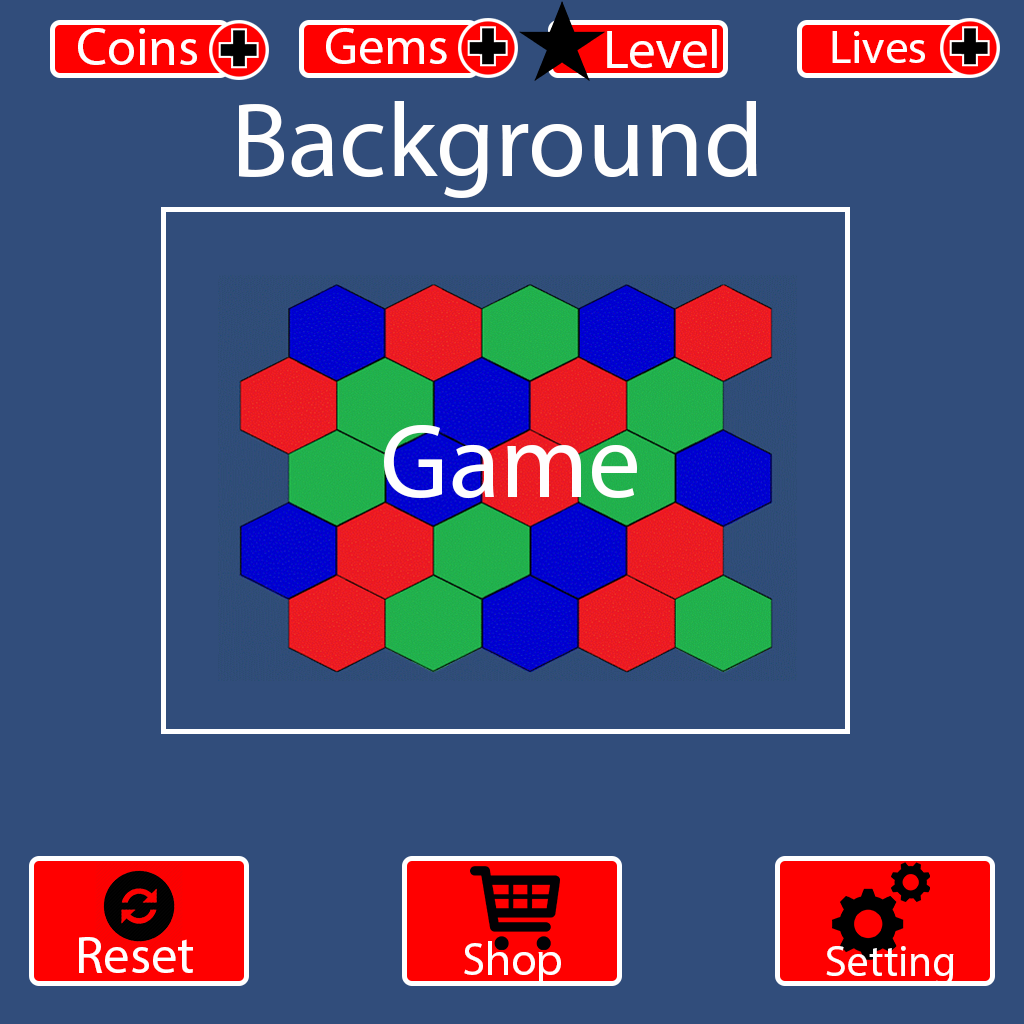
<style>
.page{position:relative;width:1024px;height:1024px;background:#314d7b}
.page>*{position:absolute;margin:0}
.t1{font:53.3px "MyriadPro-Regular";color:#fefefe}
.t2{font:52.3px "MyriadPro-Regular";color:#fefefe}
.t3{font:54.5px "MyriadPro-Regular";color:#fefefe}
.t4{font:47.3px "MyriadPro-Regular";color:#fefefe}
.t5{font:105.8px "MyriadPro-Regular";color:#fefefe}
.t6{font:52.7px "MyriadPro-Regular";color:#fefefe}
.t7{font:46.9px "MyriadPro-Regular";color:#fefefe}
.t8{font:43.6px "MyriadPro-Regular";color:#fefefe}
</style>
<div class="page">
<p class="t1" style="left:78px;top:28px;width:119px;height:37px">Coins</p>
<p class="t2" style="left:326px;top:28px;width:121px;height:36px">Gems</p>
<p class="t3" style="left:607px;top:29px;width:110px;height:39px">Level</p>
<p class="t4" style="left:832px;top:31px;width:93px;height:32px">Lives</p>
<p class="t5" style="left:239px;top:101px;width:518px;height:97px">Background</p>
<p class="t5" style="left:384px;top:425px;width:253px;height:74px">Game</p>
<p class="t6" style="left:79px;top:937px;width:114px;height:36px">Reset</p>
<p class="t7" style="left:464px;top:941px;width:97px;height:43px">Shop</p>
<p class="t8" style="left:826px;top:946px;width:128px;height:39px">Settings</p>
</div>
